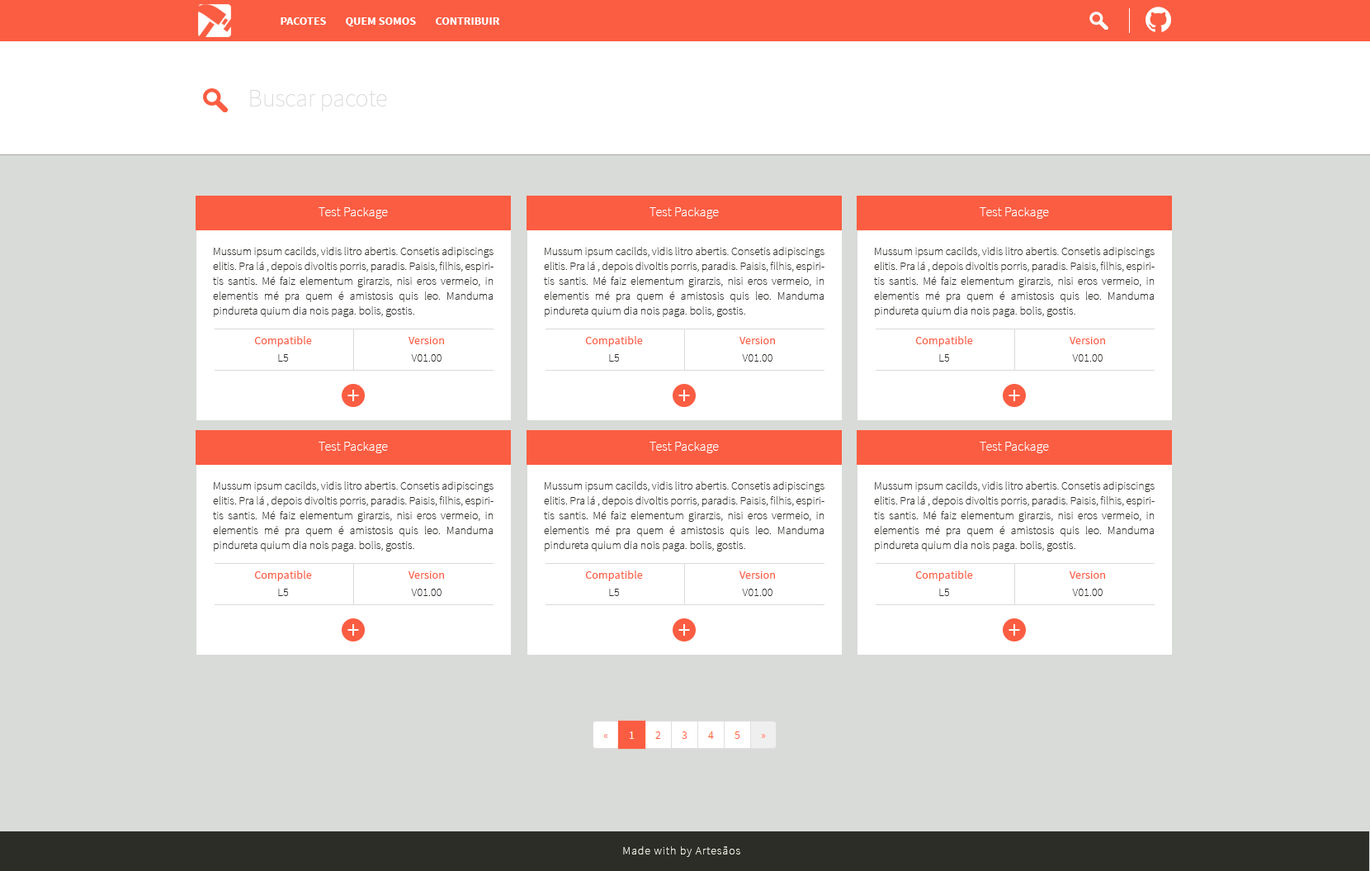
<style>
.page{position:relative;width:1370px;height:871px;background:#d9dbd8}
.page>*{position:absolute;margin:0}
.t1{font:11.6px "SourceSansPro-Bold";color:#ffffff}
.t2{font:24.8px "SourceSansPro-ExtraLight";color:#d9dbd8}
.t3{font:13.2px "SourceSansPro-ExtraLight";color:#ffffff}
.t4{font:11.6px/14.9px "SourceSansPro-ExtraLight";color:#2b2d26}
.t5{font:11.6px "SourceSansPro-Regular";color:#fb5d42}
.t6{font:11.6px "SourceSansPro-ExtraLight";color:#2b2d26}
.t7{font:24.5px "SourceSansPro-Regular";letter-spacing:0.035em;color:#ffffff}
.t8{font:11.6px "SourceSansPro-ExtraLight";letter-spacing:0.065em;color:#eceddf}
</style>
<div class="page">
<p class="t1" style="left:281px;top:17px;width:45px;height:8px">PACOTES</p>
<p class="t1" style="left:346px;top:17px;width:70px;height:9px">QUEM SOMOS</p>
<p class="t1" style="left:436px;top:17px;width:64px;height:8px">CONTRIBUIR</p>
<p class="t2" style="left:250px;top:90px;width:137px;height:21px">Buscar pacote</p>
<p class="t3" style="left:319px;top:207px;width:69px;height:12px">Test Package</p>
<p class="t3" style="left:649px;top:207px;width:70px;height:12px">Test Package</p>
<p class="t3" style="left:979px;top:207px;width:70px;height:12px">Test Package</p>
<p class="t4" style="left:213px;top:247px;width:280px;height:70px;text-align:justify">Mussum ipsum cacilds, vidis litro abertis. Consetis adipiscings elitis. Pra lá , depois divoltis porris, paradis. Paisis, filhis, espiritis santis. Mé faiz elementum girarzis, nisi eros vermeio, in elementis mé pra quem é amistosis quis leo. Manduma pindureta quium dia nois paga. bolis, gostis.</p>
<p class="t4" style="left:544px;top:247px;width:280px;height:70px;text-align:justify">Mussum ipsum cacilds, vidis litro abertis. Consetis adipiscings elitis. Pra lá , depois divoltis porris, paradis. Paisis, filhis, espiritis santis. Mé faiz elementum girarzis, nisi eros vermeio, in elementis mé pra quem é amistosis quis leo. Manduma pindureta quium dia nois paga. bolis, gostis.</p>
<p class="t4" style="left:874px;top:247px;width:280px;height:70px;text-align:justify">Mussum ipsum cacilds, vidis litro abertis. Consetis adipiscings elitis. Pra lá , depois divoltis porris, paradis. Paisis, filhis, espiritis santis. Mé faiz elementum girarzis, nisi eros vermeio, in elementis mé pra quem é amistosis quis leo. Manduma pindureta quium dia nois paga. bolis, gostis.</p>
<p class="t5" style="left:254px;top:336px;width:58px;height:11px">Compatible</p>
<p class="t5" style="left:408px;top:337px;width:36px;height:7px">Version</p>
<p class="t5" style="left:585px;top:336px;width:58px;height:11px">Compatible</p>
<p class="t5" style="left:739px;top:337px;width:36px;height:7px">Version</p>
<p class="t5" style="left:915px;top:336px;width:58px;height:11px">Compatible</p>
<p class="t5" style="left:1069px;top:337px;width:36px;height:7px">Version</p>
<p class="t6" style="left:278px;top:354px;width:11px;height:7px">L5</p>
<p class="t6" style="left:411px;top:354px;width:30px;height:7px">V01.00</p>
<p class="t6" style="left:609px;top:354px;width:11px;height:7px">L5</p>
<p class="t6" style="left:742px;top:354px;width:30px;height:7px">V01.00</p>
<p class="t6" style="left:939px;top:354px;width:11px;height:7px">L5</p>
<p class="t6" style="left:1072px;top:354px;width:30px;height:7px">V01.00</p>
<p class="t7" style="left:347px;top:389px;width:12px;height:12px">+</p>
<p class="t7" style="left:678px;top:389px;width:12px;height:12px">+</p>
<p class="t7" style="left:1008px;top:389px;width:12px;height:12px">+</p>
<p class="t3" style="left:319px;top:441px;width:69px;height:12px">Test Package</p>
<p class="t3" style="left:649px;top:441px;width:70px;height:12px">Test Package</p>
<p class="t3" style="left:979px;top:441px;width:70px;height:12px">Test Package</p>
<p class="t4" style="left:213px;top:481px;width:280px;height:70px;text-align:justify">Mussum ipsum cacilds, vidis litro abertis. Consetis adipiscings elitis. Pra lá , depois divoltis porris, paradis. Paisis, filhis, espiritis santis. Mé faiz elementum girarzis, nisi eros vermeio, in elementis mé pra quem é amistosis quis leo. Manduma pindureta quium dia nois paga. bolis, gostis.</p>
<p class="t4" style="left:544px;top:481px;width:280px;height:70px;text-align:justify">Mussum ipsum cacilds, vidis litro abertis. Consetis adipiscings elitis. Pra lá , depois divoltis porris, paradis. Paisis, filhis, espiritis santis. Mé faiz elementum girarzis, nisi eros vermeio, in elementis mé pra quem é amistosis quis leo. Manduma pindureta quium dia nois paga. bolis, gostis.</p>
<p class="t4" style="left:874px;top:481px;width:280px;height:70px;text-align:justify">Mussum ipsum cacilds, vidis litro abertis. Consetis adipiscings elitis. Pra lá , depois divoltis porris, paradis. Paisis, filhis, espiritis santis. Mé faiz elementum girarzis, nisi eros vermeio, in elementis mé pra quem é amistosis quis leo. Manduma pindureta quium dia nois paga. bolis, gostis.</p>
<p class="t5" style="left:254px;top:570px;width:58px;height:11px">Compatible</p>
<p class="t5" style="left:408px;top:571px;width:36px;height:7px">Version</p>
<p class="t5" style="left:585px;top:570px;width:58px;height:11px">Compatible</p>
<p class="t5" style="left:739px;top:571px;width:36px;height:7px">Version</p>
<p class="t5" style="left:915px;top:570px;width:58px;height:11px">Compatible</p>
<p class="t5" style="left:1069px;top:571px;width:36px;height:7px">Version</p>
<p class="t6" style="left:278px;top:588px;width:11px;height:8px">L5</p>
<p class="t6" style="left:411px;top:588px;width:30px;height:8px">V01.00</p>
<p class="t6" style="left:609px;top:588px;width:11px;height:8px">L5</p>
<p class="t6" style="left:742px;top:588px;width:30px;height:8px">V01.00</p>
<p class="t6" style="left:939px;top:588px;width:11px;height:8px">L5</p>
<p class="t6" style="left:1072px;top:588px;width:30px;height:8px">V01.00</p>
<p class="t7" style="left:347px;top:624px;width:12px;height:11px">+</p>
<p class="t7" style="left:678px;top:624px;width:12px;height:11px">+</p>
<p class="t7" style="left:1008px;top:624px;width:12px;height:11px">+</p>
<p class="t8" style="left:623px;top:846px;width:117px;height:11px">Made with by Artesãos</p>
</div>
